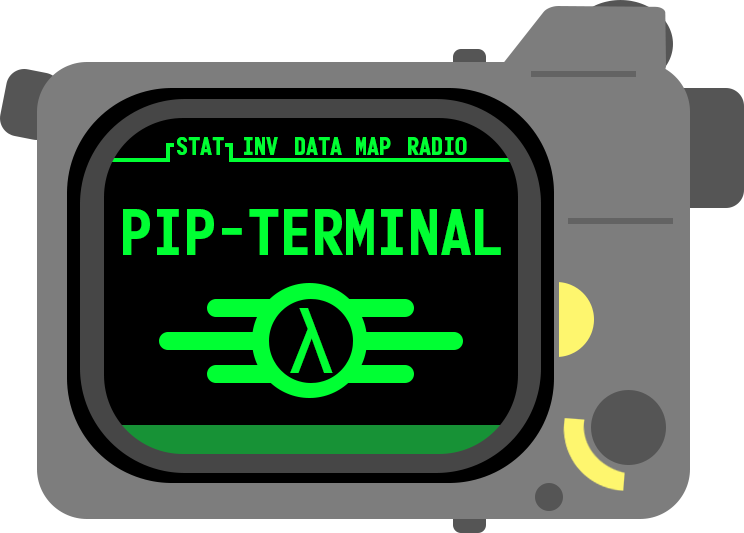
<style>
.page{position:relative;width:744px;height:533px;background:#000000}
.page>*{position:absolute;margin:0}
.t1{font:24px "Monofonto-Regular";color:#00ff33}
.t2{font:64px "Monofonto-Regular";color:#00ff33}
.t3{font:86.2px "Tahoma";color:#00ff33}
</style>
<div class="page">
<p class="t1" style="left:177px;top:137px;width:47px;height:18px">STAT</p>
<p class="t1" style="left:244px;top:137px;width:34px;height:18px">INV</p>
<p class="t1" style="left:295px;top:137px;width:47px;height:18px">DATA</p>
<p class="t1" style="left:356px;top:137px;width:35px;height:18px">MAP</p>
<p class="t1" style="left:408px;top:137px;width:59px;height:18px">RADIO</p>
<p class="t2" style="left:123px;top:209px;width:378px;height:46px">PIP-TERMINAL</p>
<p class="t3" style="left:290px;top:308px;width:43px;height:65px">λ</p>
</div>
